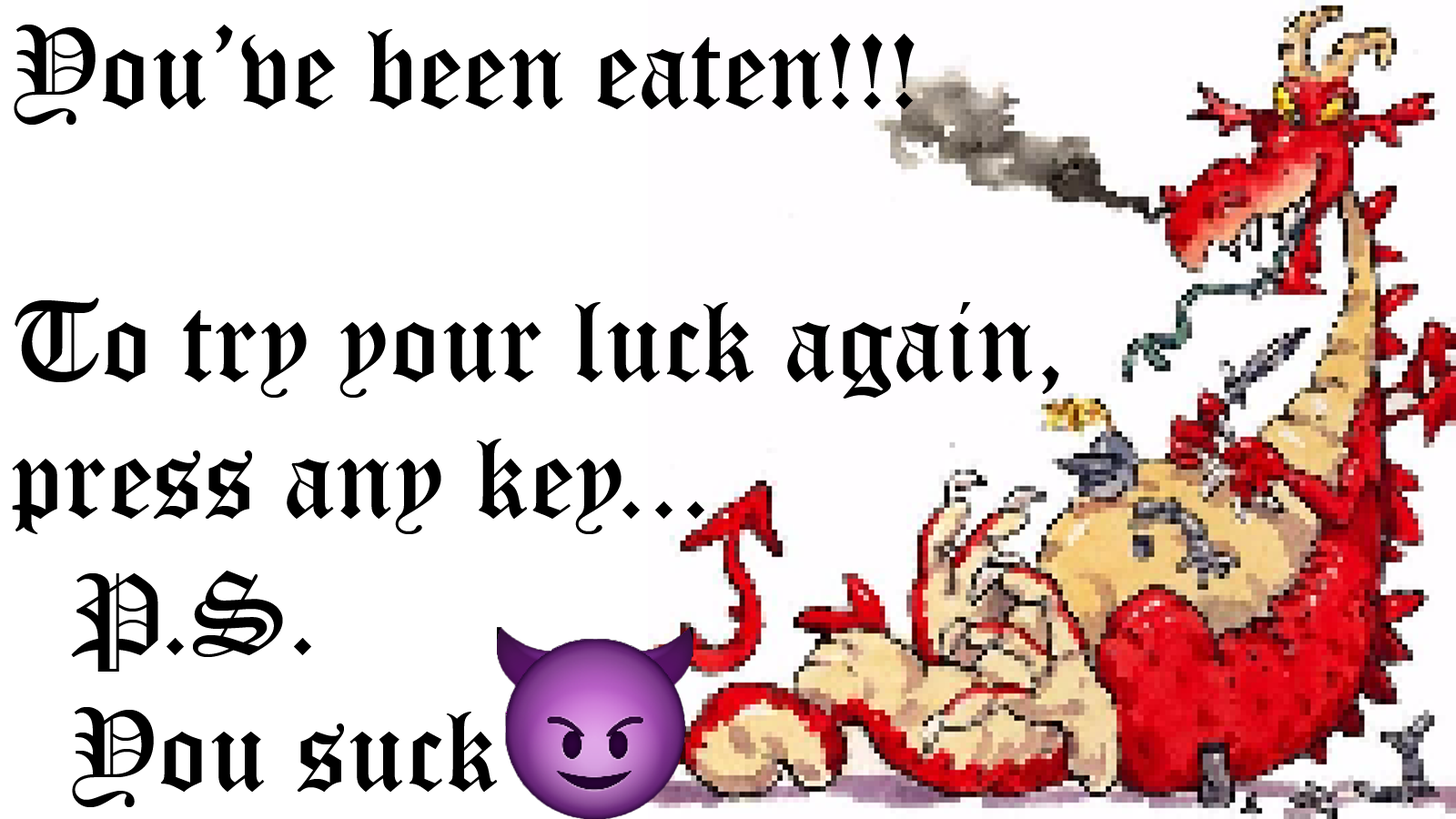
<style>
.page{position:relative;width:1456px;height:819px;background:#ffffff}
.page>*{position:absolute;margin:0}
.t1{font:113.7px "OldEnglishTextMT";color:#000000}
</style>
<div class="page">
<p class="t1" style="left:12px;top:25px;width:1047px;height:782px">You’ve been eaten!!!<br><br>To try your luck again,<br>press any key...<br>  P.S.<br>  You suck</p>
</div>
